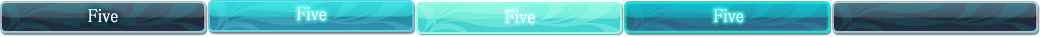
<style>
.page{position:relative;width:1040px;height:37px}
.page>*{position:absolute;margin:0}
.t1{font:19px "MS-PMincho";color:#ffffff;font-weight:bold;scale:0.84 1}
</style>
<div class="page">
<p class="t1" style="left:88px;top:9px;width:30px;height:14px">Five</p>
<p class="t1" style="left:297px;top:7px;width:29px;height:14px">Five</p>
<p class="t1" style="left:505px;top:10px;width:30px;height:14px">Five</p>
<p class="t1" style="left:714px;top:9px;width:29px;height:14px">Five</p>
</div>
